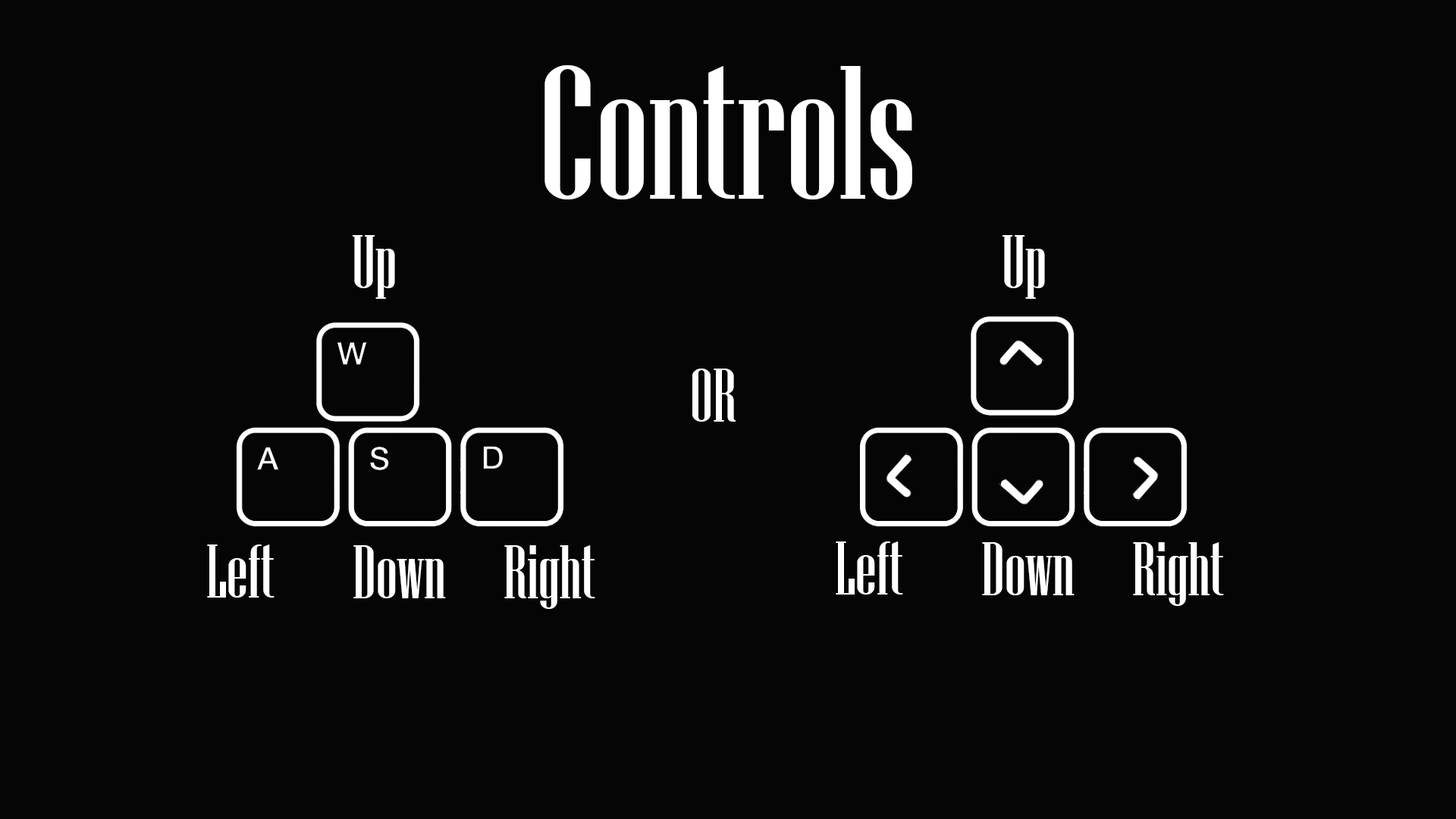
<style>
.page{position:relative;width:1456px;height:819px;background:#050505}
.page>*{position:absolute;margin:0}
.t1{font:189.6px "NiagaraSolid-Reg";color:#ffffff}
.t2{font:75.8px "NiagaraSolid-Reg";color:#ffffff}
</style>
<div class="page">
<p class="t1" style="left:544px;top:65px;width:368px;height:134px">Controls</p>
<p class="t2" style="left:353px;top:235px;width:42px;height:64px">Up</p>
<p class="t2" style="left:1003px;top:235px;width:42px;height:64px">Up</p>
<p class="t2" style="left:692px;top:369px;width:44px;height:53px">OR</p>
<p class="t2" style="left:207px;top:544px;width:68px;height:54px">Left</p>
<p class="t2" style="left:353px;top:545px;width:93px;height:53px">Down</p>
<p class="t2" style="left:504px;top:545px;width:91px;height:64px">Right</p>
<p class="t2" style="left:836px;top:541px;width:67px;height:54px">Left</p>
<p class="t2" style="left:982px;top:542px;width:93px;height:53px">Down</p>
<p class="t2" style="left:1133px;top:542px;width:91px;height:64px">Right</p>
</div>
